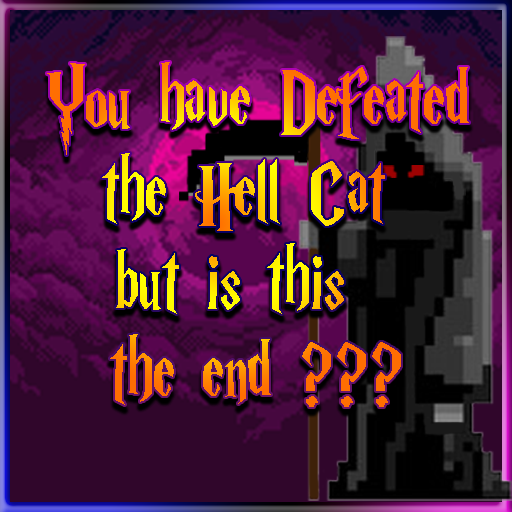
<style>
.page{position:relative;width:512px;height:512px}
.page>*{position:absolute;margin:0}
.t1{font:92.2px/90.8px "HarryP";scale:0.86 1}
</style>
<div class="page">
<p class="t1" style="left:47px;top:62px;width:422px;height:345px;text-align:center">You have Defeated<br>the Hell Cat <br>but is this  <br>the end ???</p>
</div>
